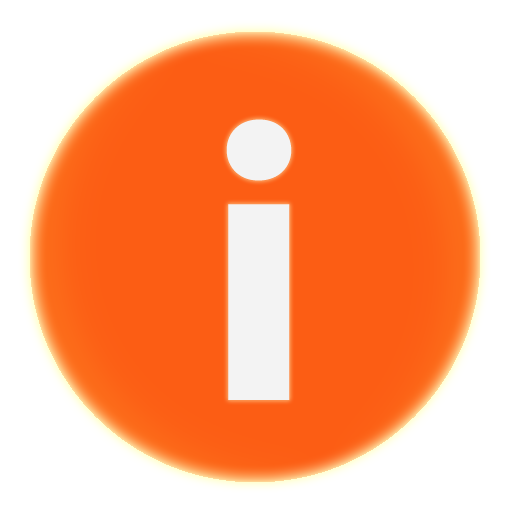
<style>
.page{position:relative;width:512px;height:512px;background:#ffffff}
.page>*{position:absolute;margin:0}
.t1{font:400px "MyriadPro-Bold";color:#f4f4f4}
</style>
<div class="page">
<p class="t1" style="left:226px;top:119px;width:66px;height:281px">i</p>
</div>
